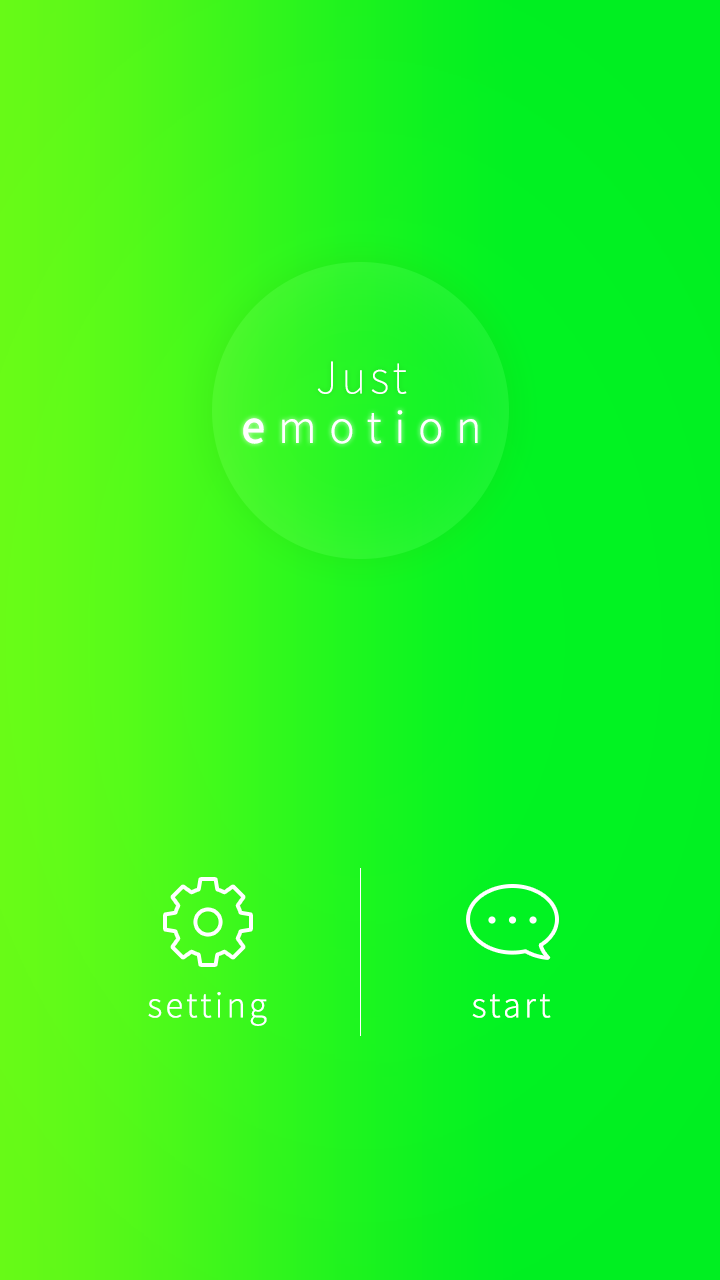
<style>
.page{position:relative;width:720px;height:1280px}
.page>*{position:absolute;margin:0}
.t1{font:43.5px "NotoSansCJKkr-Thin";letter-spacing:0.1em;color:#ffffff}
.t2{font:43.5px "NotoSansCJKkr-Light";letter-spacing:0.3em;color:#ffffff}
.t3{font:43.5px "NotoSansCJKkr-Medium";letter-spacing:0.3em;color:#ffffff}
.t4{font:33.3px "NotoSansCJKkr-Light";letter-spacing:0.1em;color:#ffffff}
</style>
<div class="page">
<p class="t1" style="left:317px;top:361px;width:90px;height:33px">Just</p>
<p class="t2" style="left:243px;top:410px;width:235px;height:34px"><span class="t1"><br></span><span class="t3">e</span>motion</p>
<p class="t4" style="left:148px;top:992px;width:119px;height:34px">setting</p>
<p class="t4" style="left:472px;top:994px;width:79px;height:24px">start</p>
</div>
